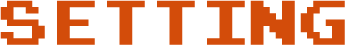
<style>
.page{position:relative;width:345px;height:45px;background:#ffffff}
.page>*{position:absolute;margin:0}
.t1{font:50px "PressStartReg";color:#d34c0a}
</style>
<div class="page">
<p class="t1" style="left:0px;top:0px;width:345px;height:45px">SETTING</p>
</div>
